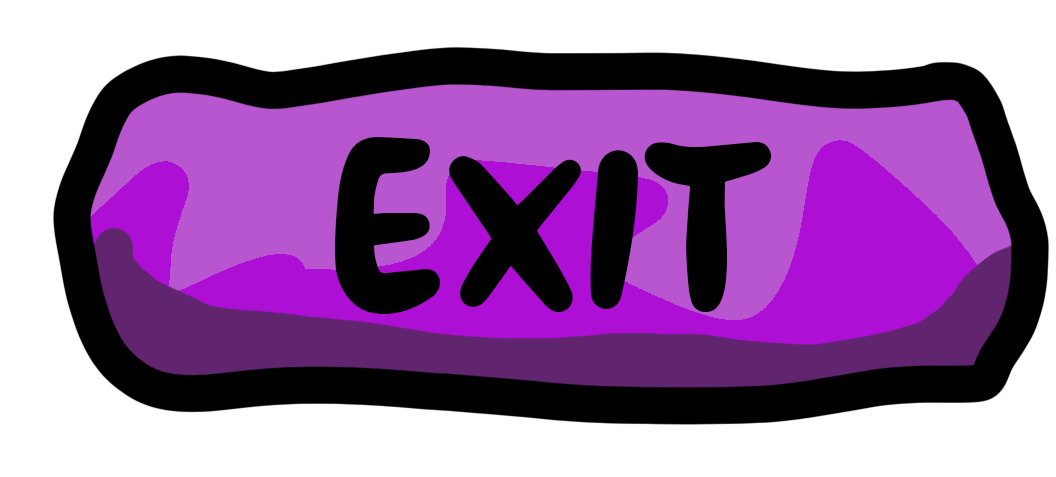
<style>
.page{position:relative;width:1056px;height:477px;background:#ffffff}
.page>*{position:absolute;margin:0}
.t1{font:200px "Pineapple-Days";color:#000000}
</style>
<div class="page">
<p class="t1" style="left:334px;top:137px;width:438px;height:177px">EXIT</p>
</div>
